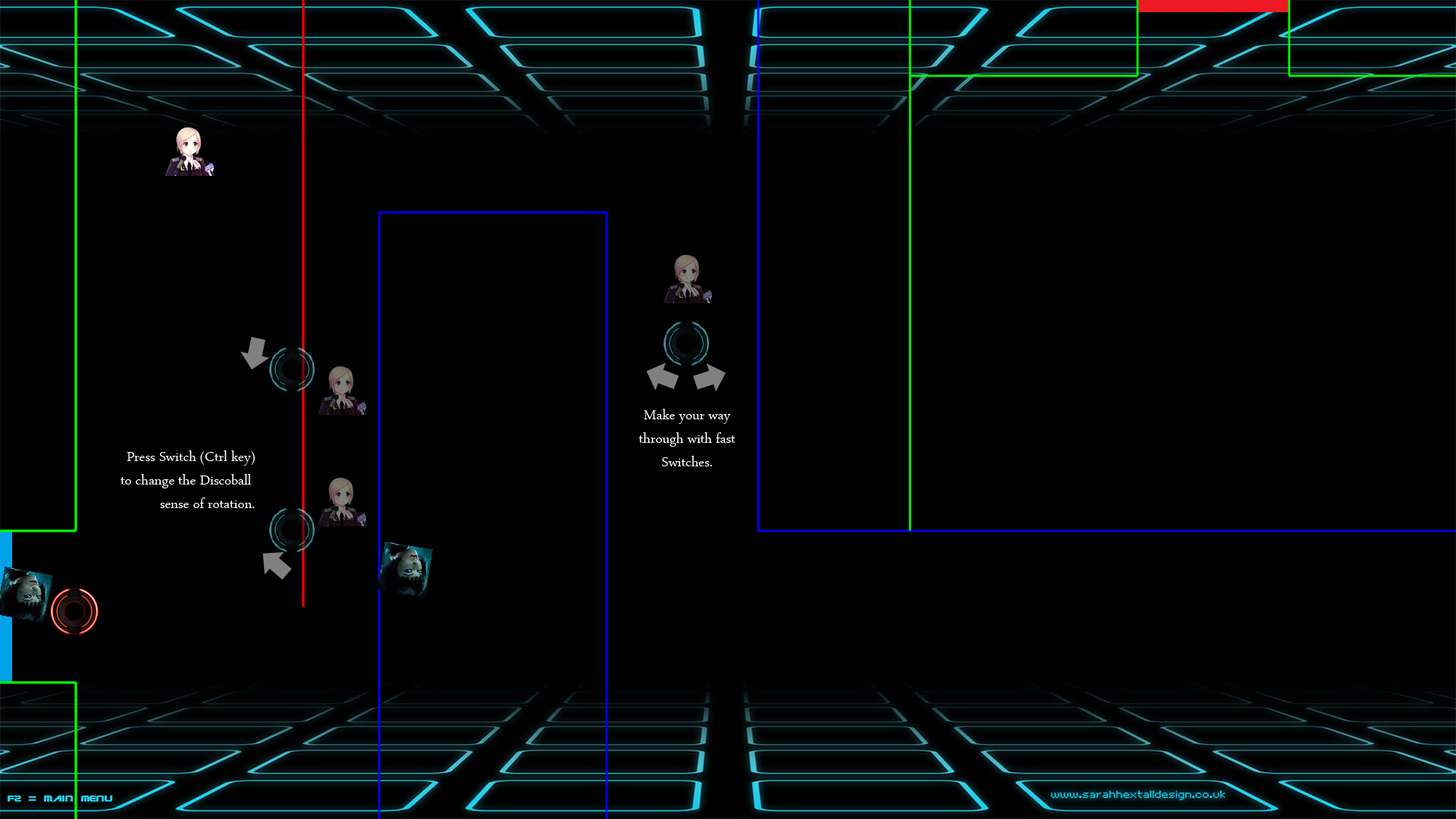
<style>
.page{position:relative;width:1456px;height:819px;background:#000000}
.page>*{position:absolute;margin:0}
.t1{font:19.7px "ArabicTypesetting";color:#ffffff}
</style>
<div class="page">
<p class="t1" style="left:639px;top:409px;width:97px;height:57px;text-align:center">Make your way<br>through with fast<br>Switches.</p>
<p class="t1" style="left:121px;top:450px;width:134px;height:58px;text-align:right">Press Switch (Ctrl key)<br>to change the Discoball <br>sense of rotation.</p>
</div>
